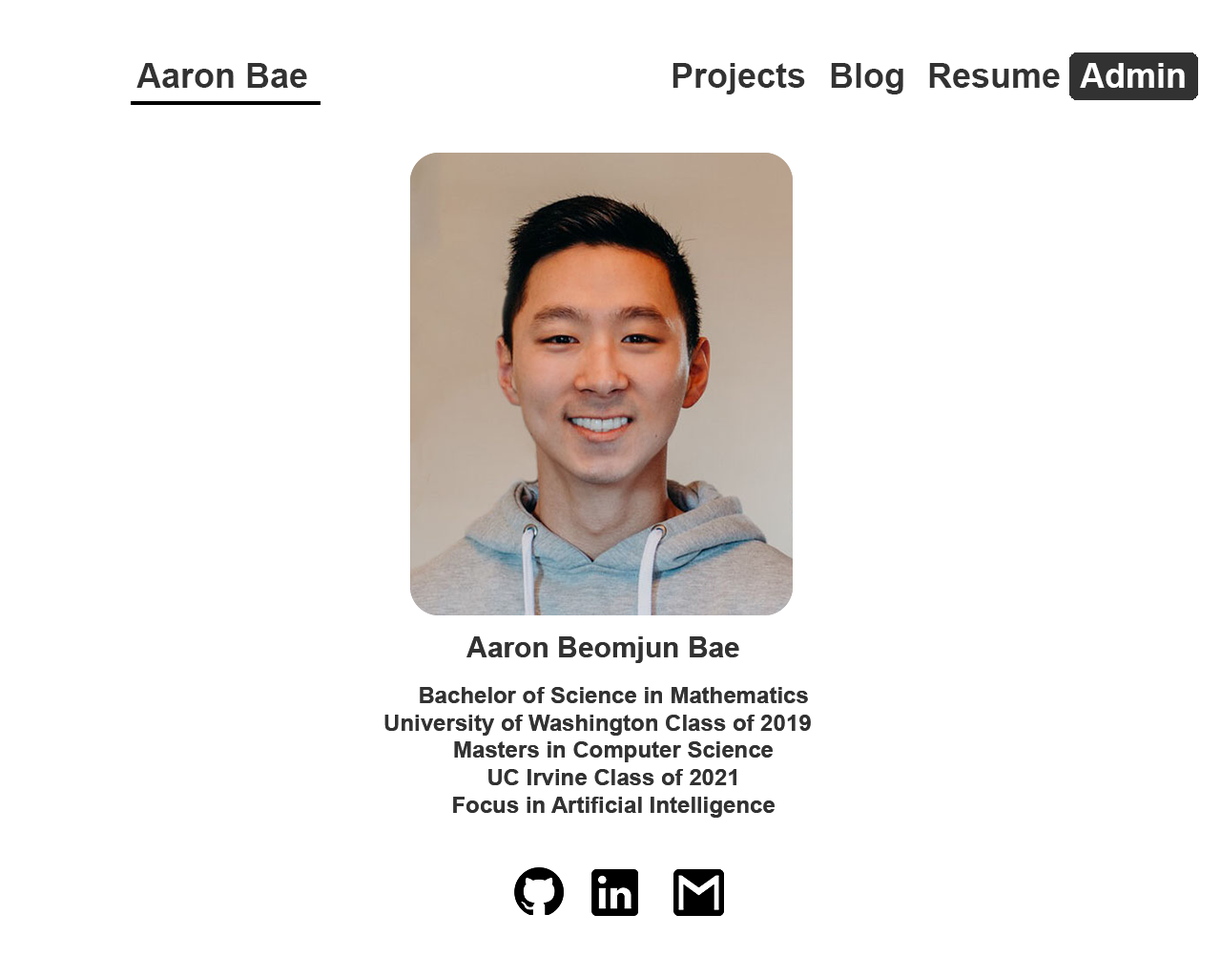
<style>
.page{position:relative;width:1221px;height:977px;background:#ffffff}
.page>*{position:absolute;margin:0}
.t1{font:34.3px "Arial-BoldMT";color:#323232}
.t2{font:34.3px "Arial-BoldMT";color:#ffffff}
.t3{font:28.6px "Arial-BoldMT";color:#323232}
.t4{font:22.9px "Arial-BoldMT";color:#323232}
</style>
<div class="page">
<p class="t1" style="left:136px;top:63px;width:171px;height:25px">Aaron Bae</p>
<p class="t1" style="left:672px;top:63px;width:133px;height:31px">Projects</p>
<p class="t1" style="left:831px;top:63px;width:72px;height:31px">Blog</p>
<p class="t1" style="left:929px;top:63px;width:131px;height:25px">Resume</p>
<p class="t2" style="left:1080px;top:63px;width:105px;height:25px">Admin</p>
<p class="t3" style="left:466px;top:636px;width:273px;height:27px">Aaron Beomjun Bae</p>
<p class="t3" style="left:466px;top:636px;width:273px;height:27px">Aaron Beomjun Bae</p>
<p class="t4" style="left:384px;top:687px;width:427px;height:130px;text-align:center">Bachelor of Science in Mathematics<br>University of Washington Class of 2019     <br>Masters in Computer Science<br>UC Irvine Class of 2021<br>Focus in Artificial Intelligence</p>
<p class="t4" style="left:384px;top:687px;width:427px;height:130px;text-align:center">Bachelor of Science in Mathematics<br>University of Washington Class of 2019     <br>Masters in Computer Science<br>UC Irvine Class of 2021<br>Focus in Artificial Intelligence</p>
</div>
